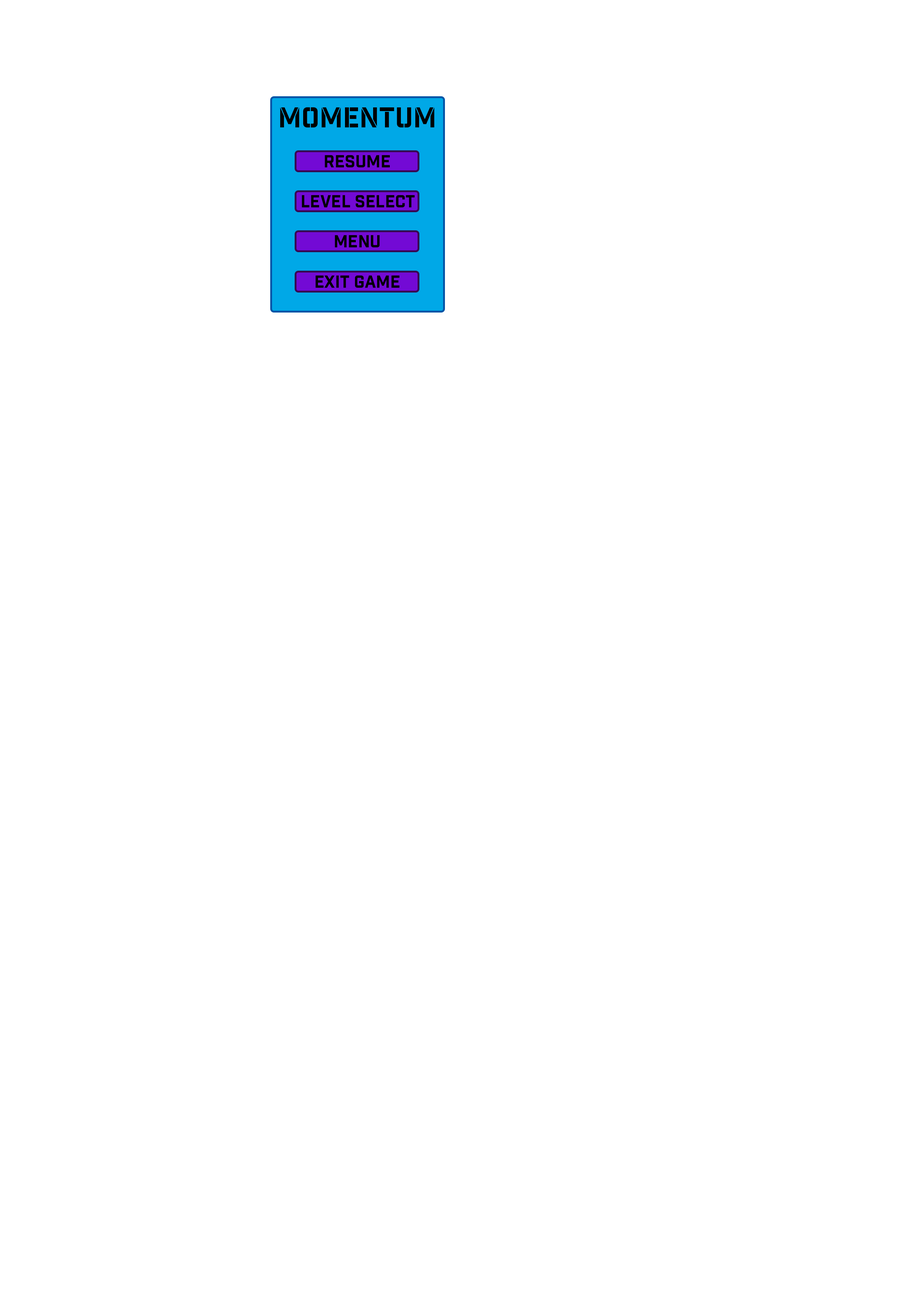
<style>
.page{position:relative;width:918px;height:1299px;background:#ffffff}
.page>*{position:absolute;margin:0}
.t1{font:27.8px "IndustryInc-Stencil";color:#000000}
.t2{font:17px "IndustryInc-Base";color:#000000}
</style>
<div class="page">
<p class="t1" style="left:280px;top:107px;width:155px;height:21px">momentum</p>
<p class="t2" style="left:325px;top:155px;width:65px;height:12px">resume</p>
<p class="t2" style="left:302px;top:195px;width:113px;height:12px">level select</p>
<p class="t2" style="left:335px;top:235px;width:45px;height:12px">menu</p>
<p class="t2" style="left:315px;top:275px;width:84px;height:13px">exit game</p>
</div>
